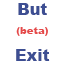
<style>
.page{position:relative;width:64px;height:64px;background:#ffffff}
.page>*{position:absolute;margin:0}
.t1{font:16px "Arial-Black";color:#3d4e92}
.t2{font:10px "Arial-Black";color:#e54949}
</style>
<div class="page">
<p class="t1" style="left:16px;top:3px;width:34px;height:58px;text-align:center">But<br><br><span class="t2">(beta)<br><br></span>Exit<br>dfdfafaf</p>
</div>
